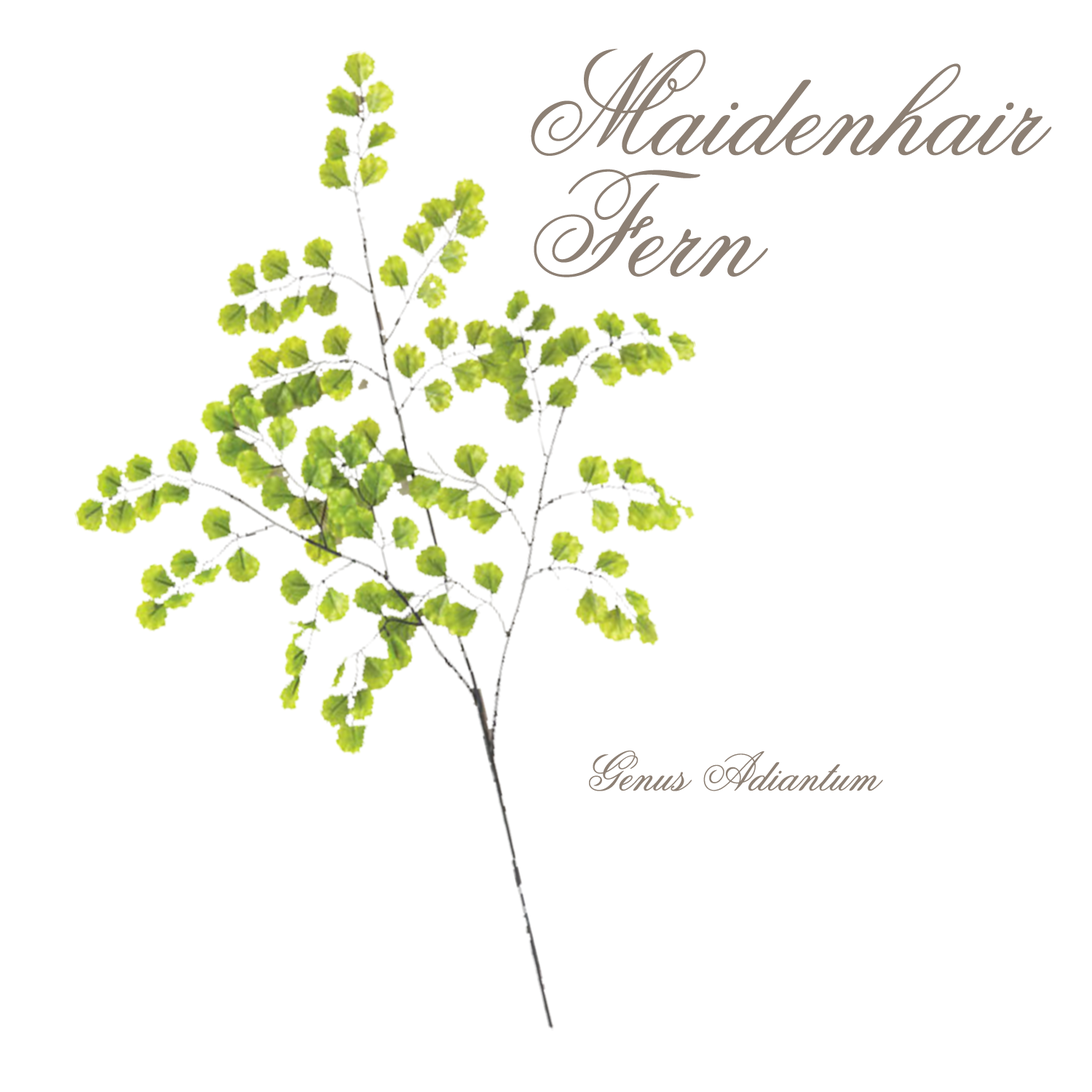
<style>
.page{position:relative;width:1092px;height:1092px;background:#ffffff}
.page>*{position:absolute;margin:0}
.t1{font:145.6px/121.3px "Old-Scrip";color:#8d8074}
.t2{font:54.6px "Old-Scrip";color:#8d8074}
</style>
<div class="page">
<p class="t1" style="left:531px;top:49px;width:521px;height:228px">Maidenhair<br>Fern</p>
<p class="t2" style="left:589px;top:751px;width:294px;height:40px">Genus Adiantum</p>
</div>
